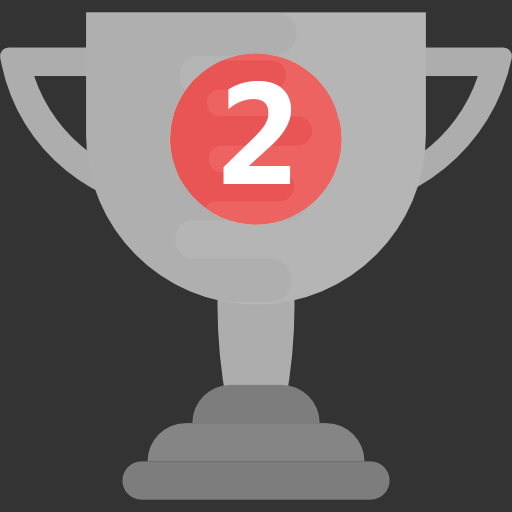
<style>
.page{position:relative;width:512px;height:512px;background:#333333}
.page>*{position:absolute;margin:0}
.t1{font:144.4px "MyanmarText-Bold";color:#ffffff}
</style>
<div class="page">
<p class="t1" style="left:223px;top:81px;width:69px;height:103px">2</p>
</div>
